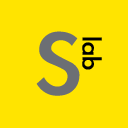
<style>
.page{position:relative;width:128px;height:128px;background:#ffe400}
.page>*{position:absolute;margin:0}
.t1{font:100px "LiGothicMed";color:#6c6f74;scale:1.1 1}
.t2{font:28px "LiGothicMed";color:#000000;scale:1.1 1}
</style>
<div class="page">
<p class="t1" style="left:36px;top:31px;width:44px;height:65px">S</p>
<p class="t2" style="left:82px;top:37px;width:20px;height:33px;rotate:90deg">lab</p>
</div>
